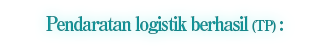
<style>
.page{position:relative;width:327px;height:48px;background:#ffffff}
.page>*{position:absolute;margin:0}
.t1{font:20px "RyuminPro-ExBold";letter-spacing:-0.08em;color:#129094;scale:0.9 1}
.t2{font:14px "RyuminPro-ExBold";letter-spacing:-0.08em;color:#129094;scale:0.9 1}
</style>
<div class="page">
<p class="t1" style="left:46px;top:16px;width:237px;height:18px">Pendaratan logistik berhasil <span class="t2">(TP)</span> :</p>
</div>
